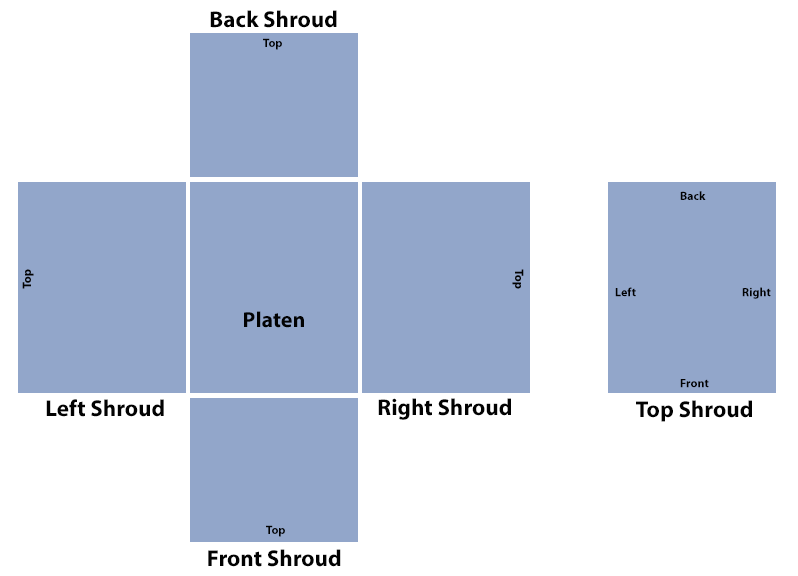
<style>
.page{position:relative;width:798px;height:576px;background:#ffffff}
.page>*{position:absolute;margin:0}
.t1{font:23.1px "MyriadPro-Bold";color:#020202}
.t2{font:12px "MyriadPro-Bold";color:#020202}
.t3{font:22px "MyriadPro-Bold";color:#020202}
</style>
<div class="page">
<p class="t1" style="left:210px;top:10px;width:127px;height:18px">Back Shroud</p>
<p class="t2" style="left:263px;top:38px;width:19px;height:12px">Top</p>
<p class="t2" style="left:680px;top:191px;width:26px;height:9px">Back</p>
<p class="t2" style="left:615px;top:287px;width:21px;height:10px">Left</p>
<p class="t2" style="left:742px;top:287px;width:29px;height:12px">Right</p>
<p class="t3" style="left:244px;top:311px;width:60px;height:17px">Platen</p>
<p class="t2" style="left:680px;top:379px;width:29px;height:9px">Front</p>
<p class="t1" style="left:46px;top:399px;width:118px;height:18px">Left Shroud</p>
<p class="t1" style="left:378px;top:398px;width:133px;height:22px">Right Shroud</p>
<p class="t1" style="left:636px;top:400px;width:116px;height:22px">Top Shroud</p>
<p class="t2" style="left:266px;top:525px;width:19px;height:12px">Top</p>
<p class="t1" style="left:208px;top:549px;width:133px;height:18px">Front Shroud</p>
</div>
